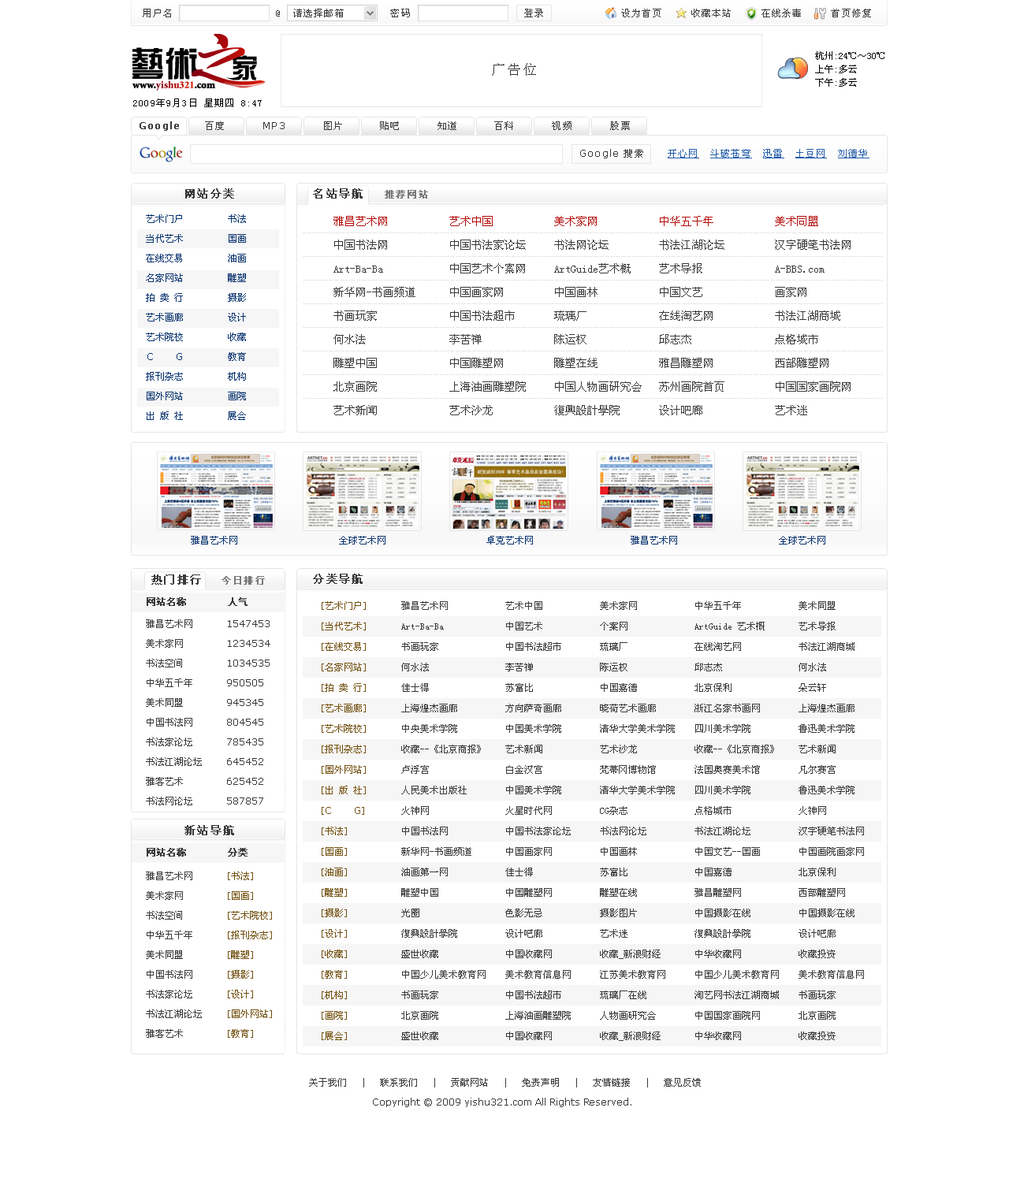
<style>
.page{position:relative;width:1009px;height:1182px;background:#ffffff}
.page>*{position:absolute;margin:0}
.t1{font:9.5px "SimSun";letter-spacing:0.1em;color:#393939}
.t2{font:14.2px "SimSun";letter-spacing:0.1em;color:#393939}
.t3{font:9.5px "SimSun";letter-spacing:0.1em;color:#010101}
.t4{font:9.5px "Verdana-Bold";letter-spacing:0.1em;color:#393939}
.t5{font:9.5px "Verdana";letter-spacing:0.1em;color:#393939}
.t6{font:9.5px "SimSun";letter-spacing:0.1em;color:#235caa;text-decoration:underline}
.t7{font:11px "SimSun";letter-spacing:0.1em;color:#393939;font-weight:bold}
.t8{font:9.5px "SimSun";letter-spacing:0.1em;color:#797979;font-weight:bold}
.t9{font:9.5px/19.7px "SimSun";color:#08336f}
.t10{font:9.5px/19.7px "Verdana";color:#08336f}
.t11{font:11px/23.6px "SimSun";color:#393939}
.t12{font:11px/23.6px "SimSun";color:#b40d0a}
.t13{font:9.5px "SimSun";color:#08336f}
.t14{font:9.5px "SimSun";color:#393939;font-weight:bold}
.t15{font:9.5px/20.5px "SimSun";color:#72500f}
.t16{font:9.5px/20.5px "Verdana";color:#72500f}
.t17{font:9.5px/20.5px "SimSun";color:#393939}
.t18{font:9.5px/19.7px "SimSun";color:#393939}
.t19{font:9.5px/19.7px "Verdana";color:#393939}
.t20{font:9.5px/19.7px "SimSun";color:#72500f}
</style>
<div class="page">
<p class="t1" style="left:143px;top:9px;width:267px;height:8px">用户名                  @  请选择邮箱        密码</p>
<p class="t1" style="left:524px;top:9px;width:19px;height:8px">登录</p>
<p class="t1" style="left:621px;top:9px;width:250px;height:8px">设为首页     收藏本站     在线杀毒     首页修复</p>
<p class="t2" style="left:492px;top:63px;width:44px;height:13px">广告位</p>
<p class="t3" style="left:133px;top:99px;width:129px;height:8px">2009年9月3日 星期四 8:47</p>
<p class="t4" style="left:139px;top:121px;width:40px;height:10px">Google</p>
<p class="t1" style="left:205px;top:121px;width:19px;height:9px">百度</p>
<p class="t5" style="left:263px;top:122px;width:21px;height:7px">MP3</p>
<p class="t1" style="left:324px;top:121px;width:18px;height:9px">图片</p>
<p class="t1" style="left:380px;top:121px;width:19px;height:9px">贴吧</p>
<p class="t1" style="left:437px;top:121px;width:19px;height:9px">知道</p>
<p class="t1" style="left:494px;top:121px;width:19px;height:9px">百科</p>
<p class="t1" style="left:552px;top:121px;width:19px;height:9px">视频</p>
<p class="t1" style="left:610px;top:121px;width:20px;height:9px">股票</p>
<p class="t5" style="left:580px;top:149px;width:63px;height:9px">Google <span class="t1">搜索</span></p>
<p class="t6" style="left:667px;top:149px;width:202px;height:9px">开心网  斗破苍穹  迅雷  土豆网  刘德华</p>
<p class="t7" style="left:185px;top:188px;width:49px;height:11px">网站分类</p>
<p class="t7" style="left:313px;top:188px;width:50px;height:11px">名站导航</p>
<p class="t8" style="left:385px;top:190px;width:43px;height:9px">推荐网站</p>
<p class="t9" style="left:146px;top:214px;width:37px;height:206px;text-align:center">艺术门户<br>当代艺术<br>在线交易<br>名家网站<br>拍 卖 行<br>艺术画廊<br>艺术院校<br><span class="t10">C       G<br></span>报刊杂志<br>国外网站<br>出 版 社</p>
<p class="t9" style="left:228px;top:214px;width:18px;height:206px;text-align:center">书法<br>国画<br>油画<br>雕塑<br>摄影 <br>设计<br>收藏<br>教育<br>机构<br>画院<br>展会</p>
<p class="t11" style="left:333px;top:216px;width:517px;height:199px"><span class="t12">雅昌艺术网           艺术中国           美术家网           中华五千年           美术同盟</span> <br>中国书法网           中国书法家论坛     书法网论坛         书法江湖论坛         汉字硬笔书法网 <br>Art-Ba-Ba            中国艺术个案网     ArtGuide艺术概     艺术导报             A-BBS.com <br>新华网-书画频道      中国画家网         中国画林           中国文艺             画家网 <br>书画玩家             中国书法超市       琉璃厂             在线淘艺网           书法江湖商城  <br>何水法               李苦禅             陈运权             邱志杰               点格城市  <br>雕塑中国             中国雕塑网         雕塑在线           雅昌雕塑网           西部雕塑网 <br>北京画院             上海油画雕塑院     中国人物画研究会   苏州画院首页         中国国家画院网 <br>艺术新闻             艺术沙龙           復興設計學院       设计吧廊             艺术迷 <br>中央美术学院         中国美术学院       清华大学美术学院   四川美术学院         鲁迅美术学院</p>
<p class="t13" style="left:191px;top:536px;width:46px;height:9px">雅昌艺术网</p>
<p class="t13" style="left:339px;top:536px;width:46px;height:9px">全球艺术网</p>
<p class="t13" style="left:486px;top:536px;width:47px;height:9px">卓克艺术网</p>
<p class="t13" style="left:630px;top:536px;width:47px;height:9px">雅昌艺术网</p>
<p class="t13" style="left:779px;top:536px;width:46px;height:9px">全球艺术网</p>
<p class="t7" style="left:151px;top:575px;width:50px;height:10px">热门排行</p>
<p class="t8" style="left:221px;top:576px;width:44px;height:9px">今日排行</p>
<p class="t7" style="left:313px;top:574px;width:50px;height:10px">分类导航</p>
<p class="t14" style="left:147px;top:597px;width:39px;height:9px">网站名称</p>
<p class="t14" style="left:228px;top:597px;width:19px;height:9px">人气</p>
<p class="t15" style="left:322px;top:601px;width:44px;height:439px">[艺术门户]<br>[当代艺术]<br>[在线交易]<br>[名家网站]<br>[拍 卖 行]<br>[艺术画廊]<br>[艺术院校]<br>[报刊杂志]<br>[国外网站]<br>[出 版 社]<br>[<span class="t16">C       G</span>]<br>[书法]<br>[国画]<br>[油画]<br>[雕塑]<br>[摄影]<br>[设计]<br>[收藏]<br>[教育]<br>[机构]<br>[画院]<br>[展会]</p>
<p class="t17" style="left:401px;top:601px;width:463px;height:440px">雅昌艺术网            艺术中国            美术家网            中华五千年            美术同盟    <br>Art-Ba-Ba             中国艺术            个案网              ArtGuide 艺术概       艺术导报<br>书画玩家              中国书法超市        琉璃厂              在线淘艺网            书法江湖商城<br>何水法                李苦禅              陈运权              邱志杰                何水法<br>佳士得                苏富比              中国嘉德            北京保利              朵云轩<br>上海煌杰画廊          方向萨奇画廊        晓荷艺术画廊        浙江名家书画网        上海煌杰画廊<br>中央美术学院          中国美术学院        清华大学美术学院    四川美术学院          鲁迅美术学院<br>收藏--《北京商报》    艺术新闻            艺术沙龙            收藏--《北京商报》    艺术新闻<br>卢浮宫                白金汉宫            梵蒂冈博物馆        法国奥赛美术馆        凡尔赛宫<br>人民美术出版社        中国美术学院        清华大学美术学院    四川美术学院          鲁迅美术学院<br>火神网                火星时代网          CG杂志              点格城市              火神网         <br>中国书法网            中国书法家论坛      书法网论坛          书法江湖论坛          汉字硬笔书法网   <br>新华网-书画频道       中国画家网          中国画林            中国文艺--国画        中国画院画家网 <br>油画第一网            佳士得              苏富比              中国嘉德              北京保利        <br>雕塑中国              中国雕塑网          雕塑在线            雅昌雕塑网            西部雕塑网     <br>光圈                  色影无忌            摄影图片            中国摄影在线          中国摄影在线   <br>復興設計學院          设计吧廊            艺术迷              復興設計學院          设计吧廊       <br>盛世收藏              中国收藏网          收藏_新浪财经       中华收藏网            收藏投资       <br>中国少儿美术教育网    美术教育信息网      江苏美术教育网      中国少儿美术教育网    美术教育信息网   <br>书画玩家              中国书法超市        琉璃厂在线          淘艺网书法江湖商城    书画玩家         <br>北京画院              上海油画雕塑院      人物画研究会        中国国家画院网        北京画院       <br>盛世收藏              中国收藏网          收藏_新浪财经       中华收藏网            收藏投资</p>
<p class="t18" style="left:146px;top:619px;width:56px;height:186px">雅昌艺术网<br>美术家网<br>书法空间<br>中华五千年<br>美术同盟<br>中国书法网<br>书法家论坛<br>书法江湖论坛<br>雅客艺术<br>书法网论坛</p>
<p class="t19" style="left:227px;top:620px;width:43px;height:185px">1547453<br>1234534<br>1034535<br>950505<br>945345<br>804545<br>785435<br>645452<br>625452<br>587857</p>
<p class="t7" style="left:184px;top:825px;width:50px;height:10px">新站导航</p>
<p class="t14" style="left:147px;top:848px;width:39px;height:9px">网站名称</p>
<p class="t14" style="left:228px;top:848px;width:19px;height:9px">分类</p>
<p class="t18" style="left:146px;top:872px;width:56px;height:166px">雅昌艺术网<br>美术家网<br>书法空间<br>中华五千年<br>美术同盟<br>中国书法网<br>书法家论坛<br>书法江湖论坛<br>雅客艺术<br>书法网论坛</p>
<p class="t20" style="left:228px;top:872px;width:44px;height:166px">[书法]<br>[国画]<br>[艺术院校]<br>[报刊杂志]<br>[雕塑]<br>[摄影]<br>[设计]<br>[国外网站]<br>[教育]</p>
<p class="t18" style="left:309px;top:1078px;width:392px;height:29px;text-align:center">关于我们   |   联系我们   |   贡献网站   |   免责声明   |   友情链接   |   意见反馈<br><span class="t19">Copyright © 2009 yishu321.com All Rights Reserved.</span></p>
</div>
